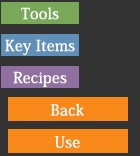
<style>
.page{position:relative;width:140px;height:156px;background:#333333}
.page>*{position:absolute;margin:0}
.t1{font:15px/32px "KozMinPro-Medium";letter-spacing:0.025em;color:#ffffff}
</style>
<div class="page">
<p class="t1" style="left:5px;top:7px;width:70px;height:80px;text-align:center">Tools<br>Key Items<br>Recipes</p>
<p class="t1" style="left:50px;top:103px;width:34px;height:45px;text-align:center">Back<br>Use</p>
</div>
